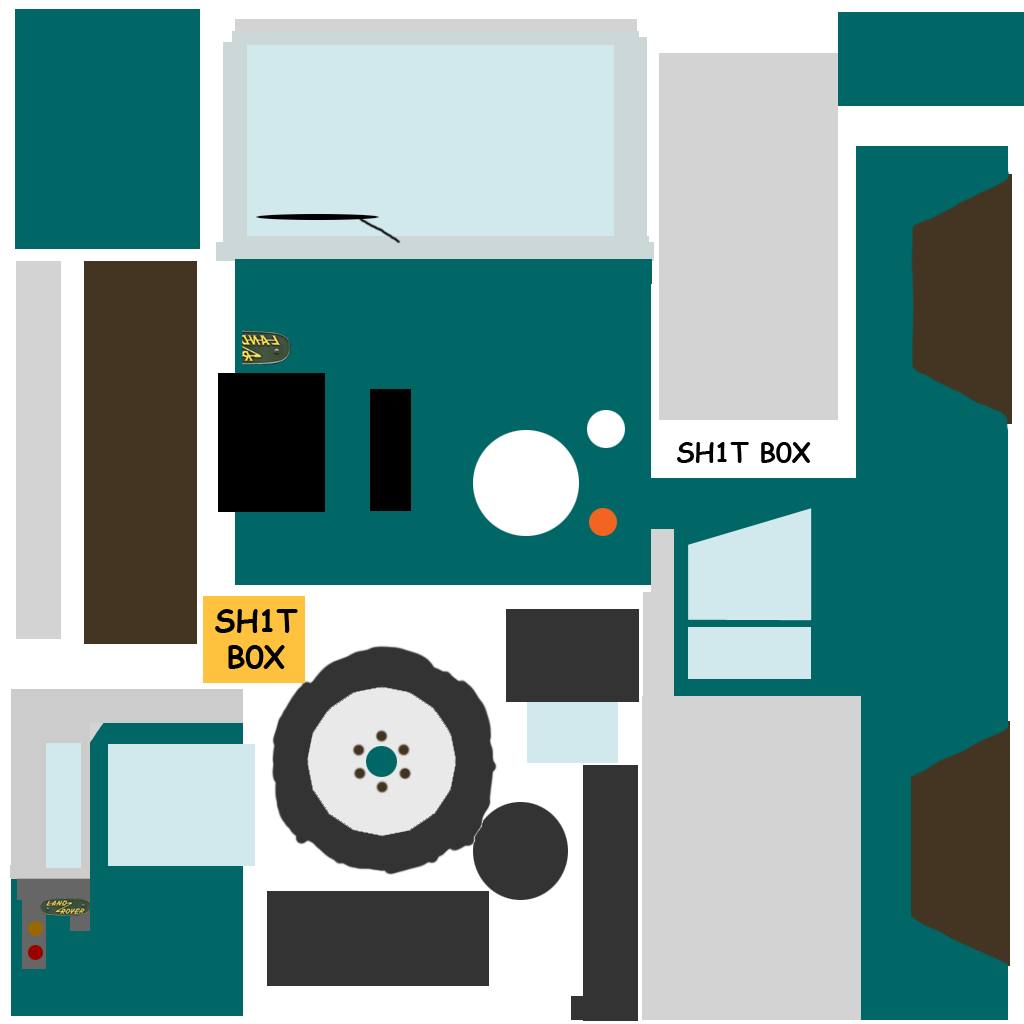
<style>
.page{position:relative;width:1024px;height:1024px;background:#006666}
.page>*{position:absolute;margin:0}
.t1{font:26px "ComicSansMS-Bold";color:#000000}
.t2{font:30px "ComicSansMS-Bold";color:#000000}
</style>
<div class="page">
<p class="t1" style="left:677px;top:442px;width:134px;height:21px">SH1T B0X</p>
<p class="t2" style="left:215px;top:609px;width:83px;height:60px;text-align:center">SH1T<br>B0X</p>
</div>
